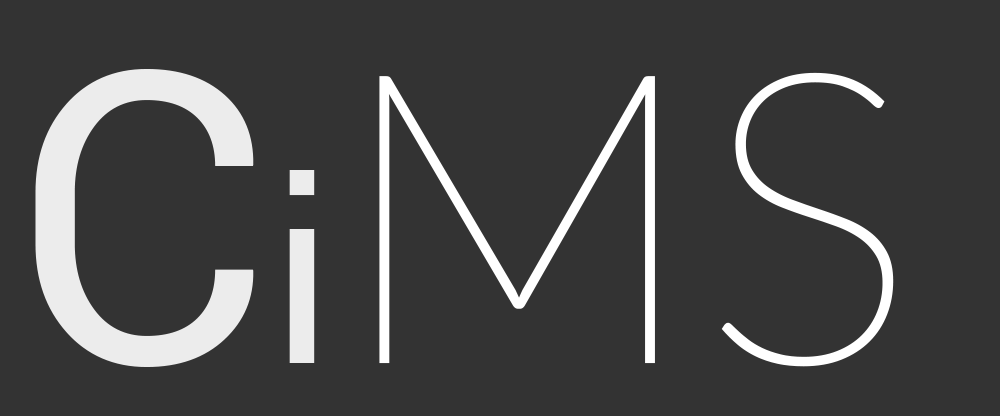
<style>
.page{position:relative;width:1000px;height:416px;background:#333333}
.page>*{position:absolute;margin:0}
.t1{font:408.4px "Lato-Thin";color:#ffffff}
.t2{font:408.4px "Roboto-Regular";color:#ececec}
.t3{font:254.2px "Roboto-Regular";color:#ececec}
</style>
<div class="page">
<p class="t1" style="left:35px;top:69px;width:859px;height:298px"><span class="t2">C</span><span class="t3">i</span>MS</p>
</div>
